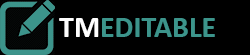
<style>
.page{position:relative;width:250px;height:55px;background:#000000}
.page>*{position:absolute;margin:0}
.t1{font:30px "Calibri-Bold";color:#3c948b}
.t2{font:30px "Calibri-Bold";color:#fefefe}
</style>
<div class="page">
<p class="t1" style="left:59px;top:18px;width:156px;height:19px"><span class="t2">TM</span>EDITABLE</p>
</div>
